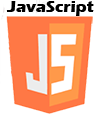
<style>
.page{position:relative;width:100px;height:114px;background:#ffffff}
.page>*{position:absolute;margin:0}
.t1{font:16.6px "ErasITC-Bold";color:#000000}
</style>
<div class="page">
<p class="t1" style="left:6px;top:1px;width:88px;height:15px">JavaScript</p>
</div>
